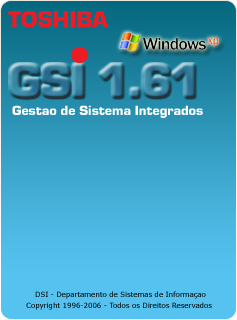
<style>
.page{position:relative;width:237px;height:320px}
.page>*{position:absolute;margin:0}
.t1{font:24px "Eurostile-Black";color:#ed1c24}
.t2{font:14px "Eurostile-Black";color:#ffffff}
.t3{font:7px "Verdana"}
</style>
<div class="page">
<p class="t1" style="left:8px;top:11px;width:100px;height:16px">TOSHIBA</p>
<p class="t2" style="left:12px;top:105px;width:191px;height:13px">Gestao de Sistema Integrados</p>
<p class="t3" style="left:35px;top:291px;width:171px;height:8px">DSI - Departamento de Sistemas de Informaçao</p>
<p class="t3" style="left:26px;top:302px;width:186px;height:8px">Copyright 1996-2006 - Todos os Direitos Reservados</p>
</div>
